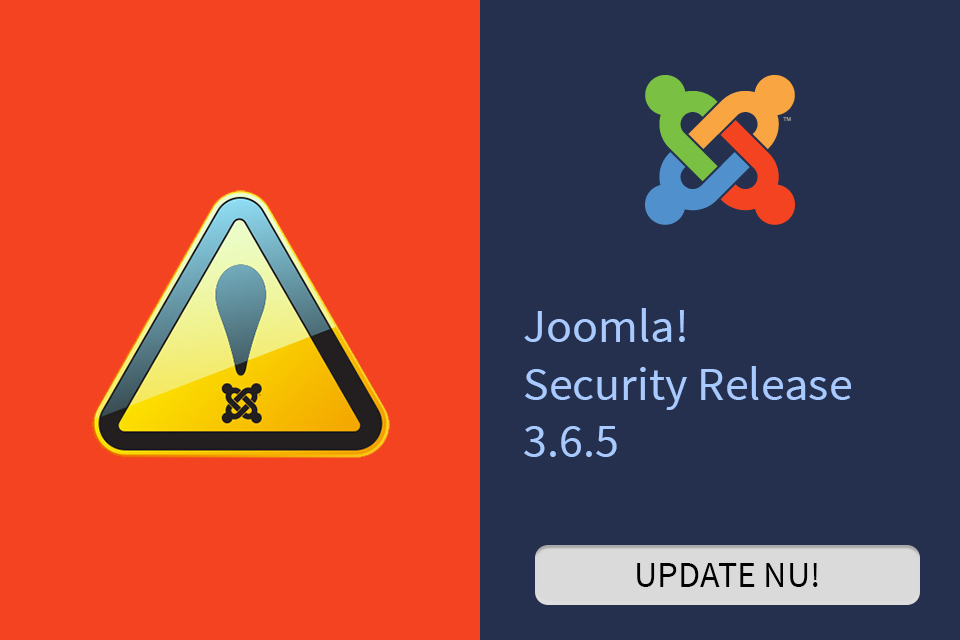
<style>
.page{position:relative;width:960px;height:640px;background:#25304e}
.page>*{position:absolute;margin:0}
.t1{font:48px "SourceSansPro-Regular";color:#a8caff}
.t2{font:36px "SourceSansPro-Regular";color:#000000}
</style>
<div class="page">
<p class="t1" style="left:524px;top:308px;width:327px;height:149px">Joomla!<br>Security Release<br>3.6.5</p>
<p class="t2" style="left:637px;top:563px;width:181px;height:24px">UPDATE NU!</p>
</div>
